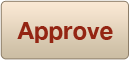
<style>
.page{position:relative;width:130px;height:60px}
.page>*{position:absolute;margin:0}
.t1{font:24px "HelveticaNeue-Bold";color:#942513}
</style>
<div class="page">
<p class="t1" style="left:17px;top:22px;width:96px;height:21px">Approve</p>
</div>
